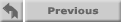
<style>
.page{position:relative;width:121px;height:22px;background:#cccccc}
.page>*{position:absolute;margin:0}
.t1{font:9px "Verdana-Bold";letter-spacing:0.01em;color:#666666;scale:1.15 1}
</style>
<div class="page">
<p class="t1" style="left:48px;top:7px;width:51px;height:8px">Previous</p>
</div>
